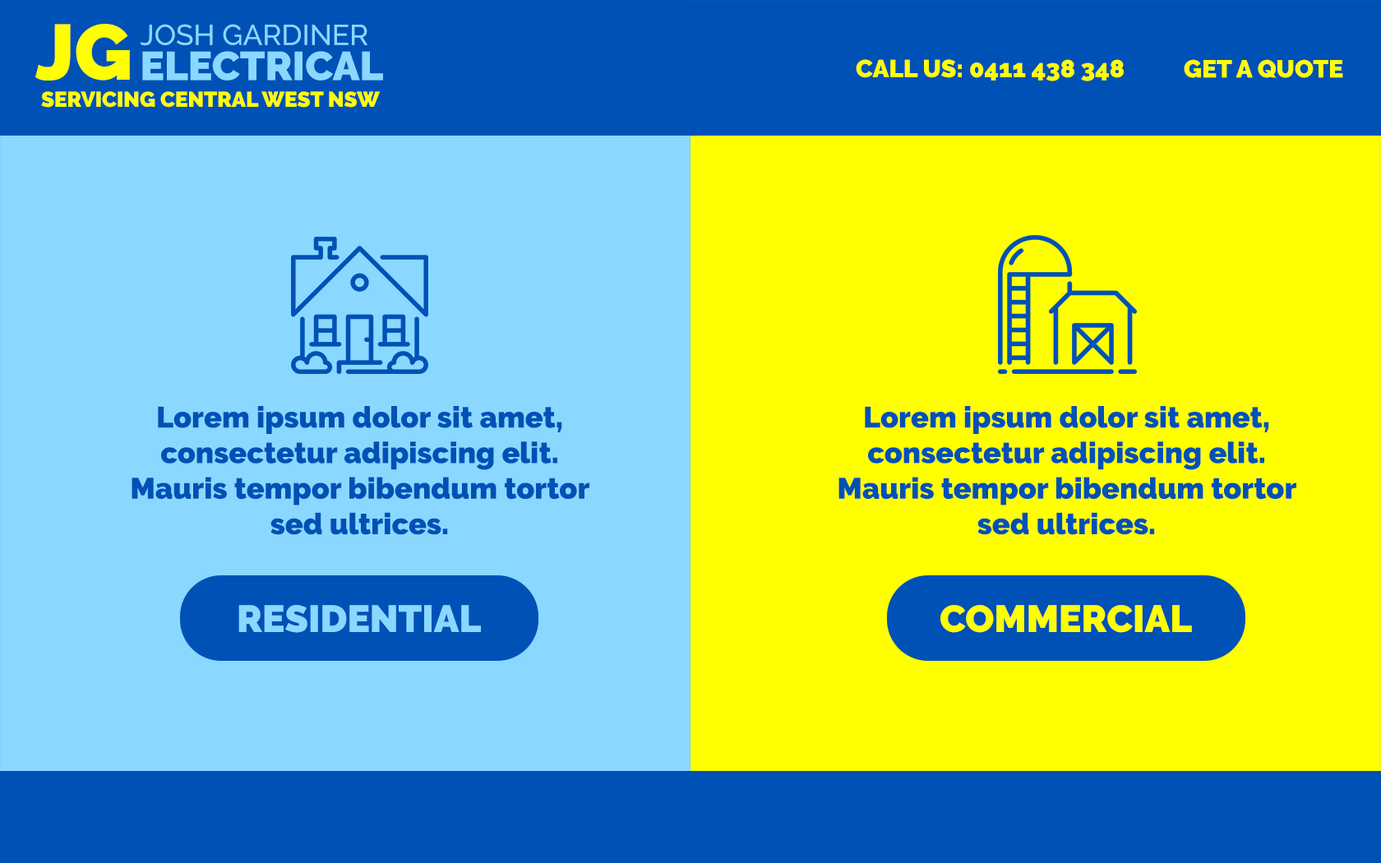
<style>
.page{position:relative;width:1381px;height:863px;background:#ffff00}
.page>*{position:absolute;margin:0}
.t1{font:78.1px "Raleway-Black";color:#ffff00}
.t2{font:28.8px/35.1px "Raleway-Medium";color:#8ad8ff}
.t3{font:40.3px/35.1px "Raleway-Black";color:#8ad8ff}
.t4{font:24.7px "Raleway-Black";color:#ffff00}
.t5{font:21.4px "Raleway-Black";color:#ffff01}
.t6{font:29.6px "Raleway-Black";color:#0051b6}
.t7{font:37.8px "Raleway-Black";color:#8ad8ff}
.t8{font:37.8px "Raleway-Black";color:#ffff00}
</style>
<div class="page">
<p class="t1" style="left:35px;top:24px;width:95px;height:57px">JG</p>
<p class="t2" style="left:141px;top:24px;width:242px;height:57px">JOSH GARDINER<br><span class="t3">ELECTRICAL</span></p>
<p class="t4" style="left:856px;top:59px;width:268px;height:22px">CALL US: 0411 438 348</p>
<p class="t4" style="left:1184px;top:59px;width:159px;height:19px">GET A QUOTE</p>
<p class="t5" style="left:41px;top:91px;width:339px;height:17px">SERVICING CENTRAL WEST NSW</p>
<p class="t6" style="left:132px;top:406px;width:458px;height:129px;text-align:center">Lorem ipsum dolor sit amet, consectetur adipiscing elit. Mauris tempor bibendum tortor sed ultrices.</p>
<p class="t6" style="left:839px;top:406px;width:458px;height:129px;text-align:center">Lorem ipsum dolor sit amet, consectetur adipiscing elit. Mauris tempor bibendum tortor sed ultrices.</p>
<p class="t7" style="left:238px;top:605px;width:243px;height:28px">RESIDENTIAL</p>
<p class="t8" style="left:941px;top:605px;width:251px;height:28px">COMMERCIAL</p>
</div>
